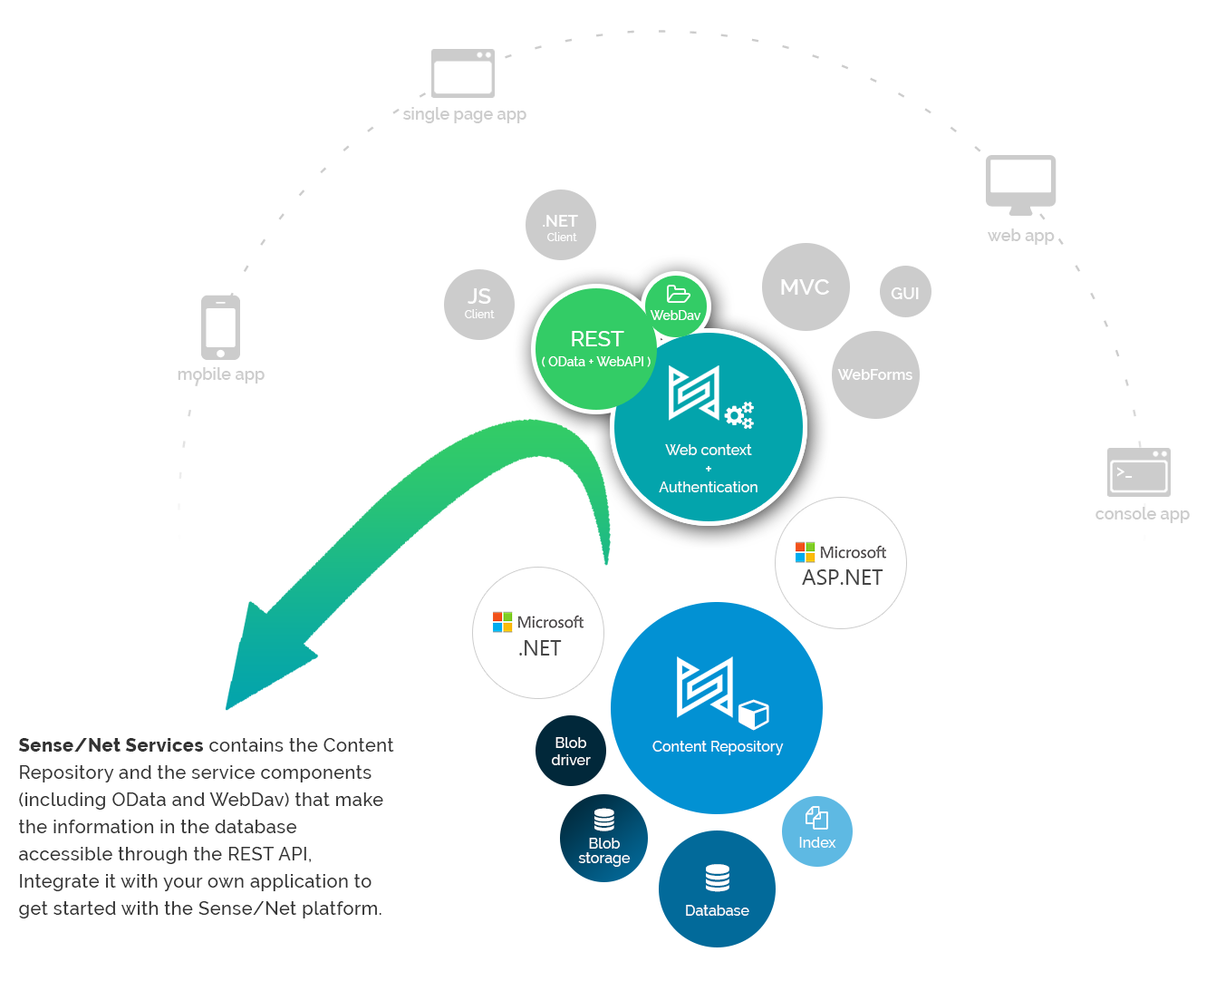
<style>
.page{position:relative;width:1216px;height:981px;background:#ffffff}
.page>*{position:absolute;margin:0}
.t1{font:16.3px "Raleway-SemiBold";color:#cccccc}
.t2{font:10.9px/14.5px "Raleway-Medium";color:#ffffff}
.t3{font:16.3px/14.5px "Raleway-SemiBold";color:#ffffff}
.t4{font:22.7px "Raleway-SemiBold";color:#ffffff}
.t5{font:21.7px/14.5px "Raleway-SemiBold";color:#ffffff}
.t6{font:16.3px "Raleway-SemiBold";color:#ffffff}
.t7{font:12.7px "Raleway-Medium";color:#ffffff}
.t8{font:21.7px "Raleway-Medium";color:#ffffff}
.t9{font:14.5px "Raleway-SemiBold";color:#ffffff}
.t10{font:14.5px "Raleway-Medium";color:#ffffff}
.t11{font:16.3px "Raleway-Medium";color:#ffffff}
.t12{font:21.7px "SegoeUI";color:#444444}
.t13{font:18.1px/27.2px "Raleway-Medium";letter-spacing:0.025em;color:#333333}
.t14{font:18.1px/27.2px "Raleway-ExtraBold";letter-spacing:0.025em;color:#333333}
.t15{font:14.5px/14.5px "Raleway-Medium";color:#ffffff}
</style>
<div class="page">
<p class="t1" style="left:403px;top:107px;width:124px;height:16px">single page app</p>
<p class="t2" style="left:543px;top:215px;width:35px;height:26px;text-align:center"><span class="t3">.NET <br></span>Client</p>
<p class="t1" style="left:988px;top:228px;width:67px;height:17px">web app</p>
<p class="t4" style="left:781px;top:279px;width:48px;height:16px">MVC</p>
<p class="t2" style="left:465px;top:288px;width:30px;height:30px;text-align:center"><span class="t5">JS<br></span>Client</p>
<p class="t6" style="left:891px;top:287px;width:28px;height:12px">GUI</p>
<p class="t7" style="left:650px;top:310px;width:51px;height:10px">WebDav</p>
<p class="t8" style="left:572px;top:331px;width:52px;height:15px">REST</p>
<p class="t7" style="left:542px;top:356px;width:109px;height:11px">( OData + WebAPI )</p>
<p class="t1" style="left:178px;top:367px;width:87px;height:16px">mobile app</p>
<p class="t9" style="left:837px;top:369px;width:76px;height:11px">WebForms</p>
<p class="t10" style="left:659px;top:444px;width:99px;height:48px;text-align:center">Web context<br><span class="t11">+<br></span>Authentication</p>
<p class="t6" style="left:1116px;top:467px;width:17px;height:11px">&gt;_</p>
<p class="t1" style="left:1096px;top:507px;width:94px;height:16px">console app</p>
<p class="t12" style="left:802px;top:569px;width:82px;height:16px">ASP.NET</p>
<p class="t12" style="left:519px;top:640px;width:43px;height:15px">.NET</p>
<p class="t13" style="left:18px;top:738px;width:376px;height:180px"><span class="t14">Sense/Net Services</span> contains the Content Repository and the service components (including OData and WebDav) that make the information in the database accessible through the REST API, Integrate it with your own application to get started with the Sense/Net platform.</p>
<p class="t10" style="left:552px;top:737px;width:39px;height:28px;text-align:center">Blob<br>driver</p>
<p class="t10" style="left:652px;top:740px;width:132px;height:15px">Content Repository</p>
<p class="t15" style="left:578px;top:837px;width:53px;height:29px;text-align:center">Blob storage</p>
<p class="t10" style="left:799px;top:836px;width:37px;height:11px">Index</p>
<p class="t10" style="left:686px;top:904px;width:63px;height:11px">Database</p>
</div>
